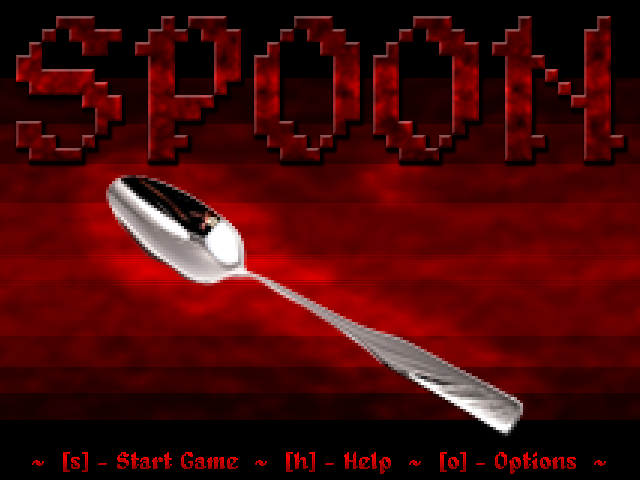
<style>
.page{position:relative;width:640px;height:480px;background:#000000}
.page>*{position:absolute;margin:0}
.t1{font:211.5px "Alagard";text-transform:uppercase}
.t2{font:24px "Alagard"}
</style>
<div class="page">
<p class="t1" style="left:16px;top:16px;width:608px;height:145px">SPOON</p>
<p class="t2" style="left:32px;top:452px;width:574px;height:22px">~  [s] - Start Game  ~  [h] - Help  ~  [o] - Options  ~</p>
</div>
